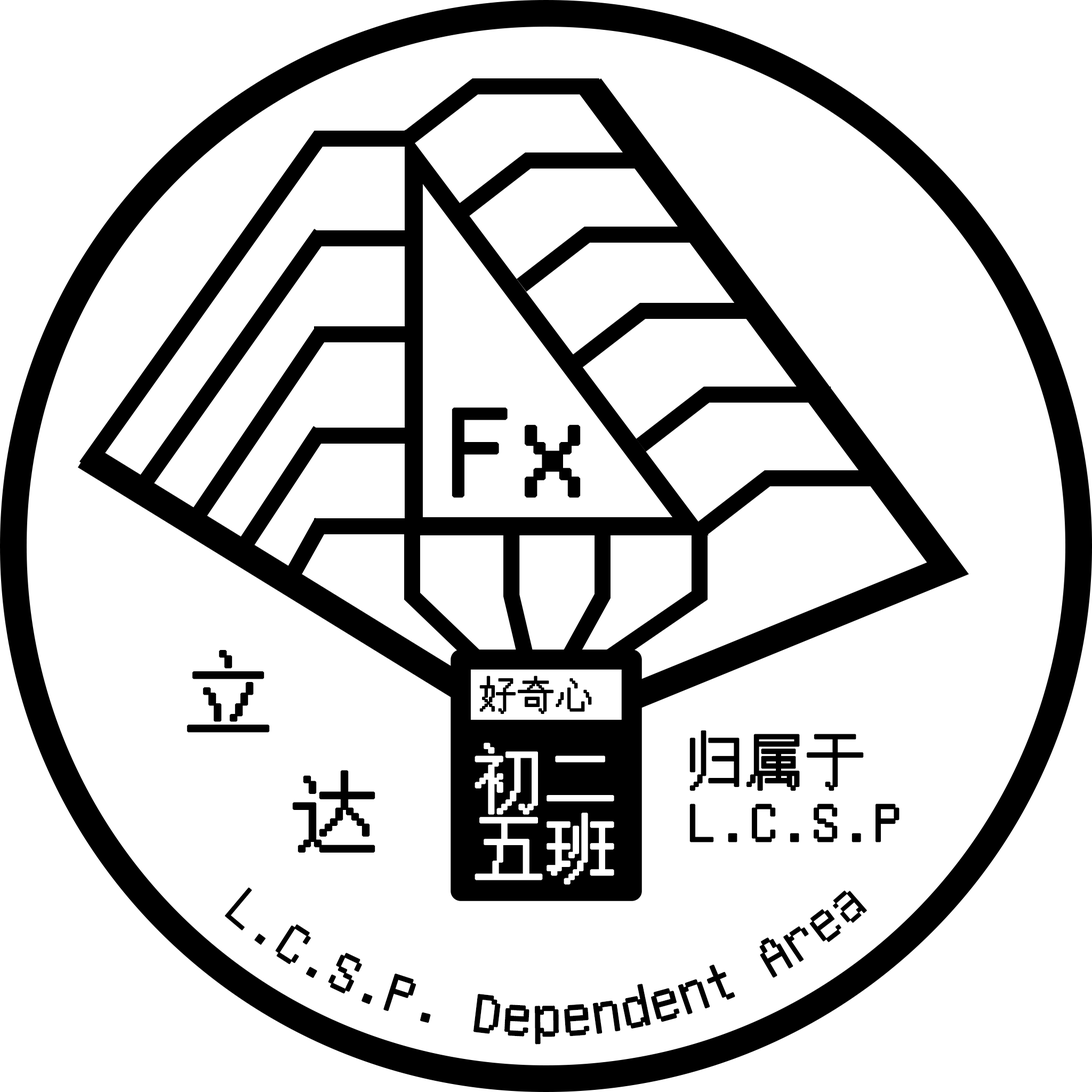
<style>
.page{position:relative;width:1092px;height:1092px;background:#ffffff}
.page>*{position:absolute;margin:0}
.t1{font:137.9px "GNUUnifontFull";color:#000000;font-weight:bold}
.t2{font:85.3px "GNUUnifontFull";color:#000000;font-weight:bold}
.t3{font:37px "GNUUnifontFull";color:#000000;font-weight:bold}
.t4{font:58.7px/58.8px "GNUUnifontFull";color:#000000;font-weight:bold}
.t5{font:69.7px/69.9px "GNUUnifontFull";color:#ffffff;font-weight:bold}
</style>
<div class="page">
<p class="t1" style="left:452px;top:407px;width:129px;height:91px">Fx</p>
<p class="t2" style="left:187px;top:650px;width:83px;height:83px">立</p>
<p class="t3" style="left:479px;top:676px;width:113px;height:38px">好奇心</p>
<p class="t4" style="left:689px;top:730px;width:211px;height:112px">归属于<br>L.C.S.P</p>
<p class="t5" style="left:475px;top:743px;width:139px;height:142px">初二<br>五班</p>
<p class="t2" style="left:292px;top:770px;width:83px;height:83px">达</p>
<p class="t4" style="left:224px;top:887px;width:643px;height:158px">L.C.S.P. Dependent Area</p>
</div>
